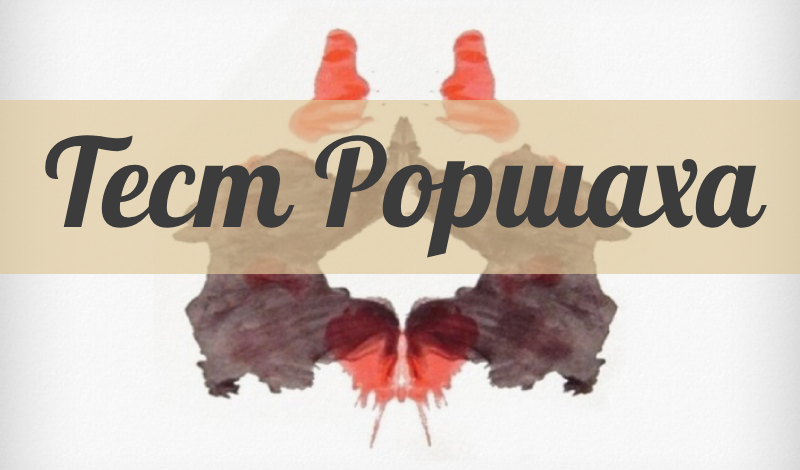
<style>
.page{position:relative;width:800px;height:470px}
.page>*{position:absolute;margin:0}
.t1{font:122.4px "Pattaya-Regular";color:#3c3c3c}
</style>
<div class="page">
<p class="t1" style="left:45px;top:135px;width:722px;height:123px">Тест Роршаха</p>
</div>
